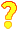
<style>
.page{position:relative;width:18px;height:30px;background:#ffffff}
.page>*{position:absolute;margin:0}
.t1{font:33.3px "NotoSansCJKkr-Bold";color:#fffd1d}
</style>
<div class="page">
<p class="t1" style="left:2px;top:2px;width:14px;height:26px">?</p>
</div>
